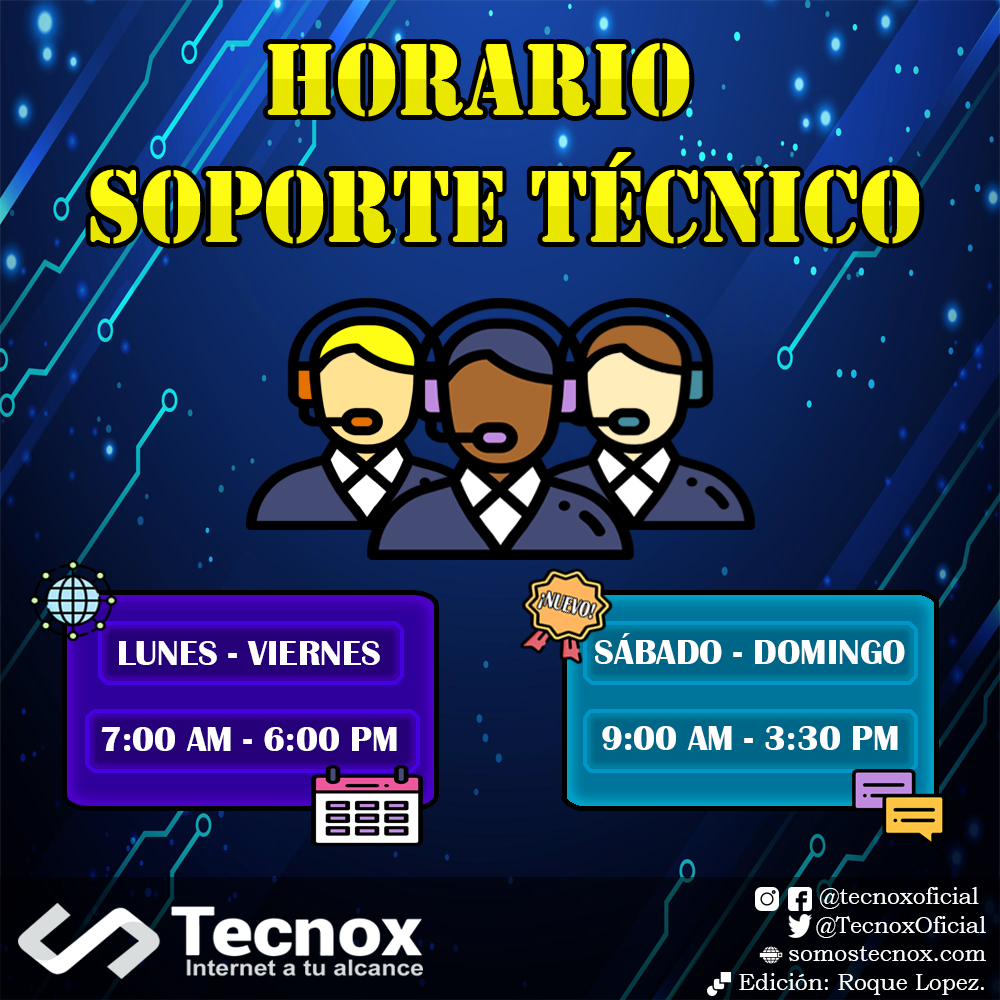
<style>
.page{position:relative;width:1000px;height:1000px}
.page>*{position:absolute;margin:0}
.t1{font:36px "BritannicBold";color:#ffffff}
.t2{font:36px "BritannicBold";color:#00e5dd}
.t3{font:24px "BookmanOldStyle";color:#ffffff;scale:0.95 1}
</style>
<div class="page">
<p class="t1" style="left:101px;top:641px;width:296px;height:110px;text-align:center">LUNES - VIERNES<br><span class="t2"><br></span>7:00 AM - 6:00 PM</p>
<p class="t1" style="left:595px;top:633px;width:310px;height:117px;text-align:center">SÁBADO - DOMINGO<br><br>9:00 AM - 3:30 PM</p>
<p class="t3" style="left:739px;top:887px;width:247px;height:108px;text-align:right">@tecnoxoficial <br>@TecnoxOficial<br>somostecnox.com<br>Edición: Roque Lopez.</p>
</div>
